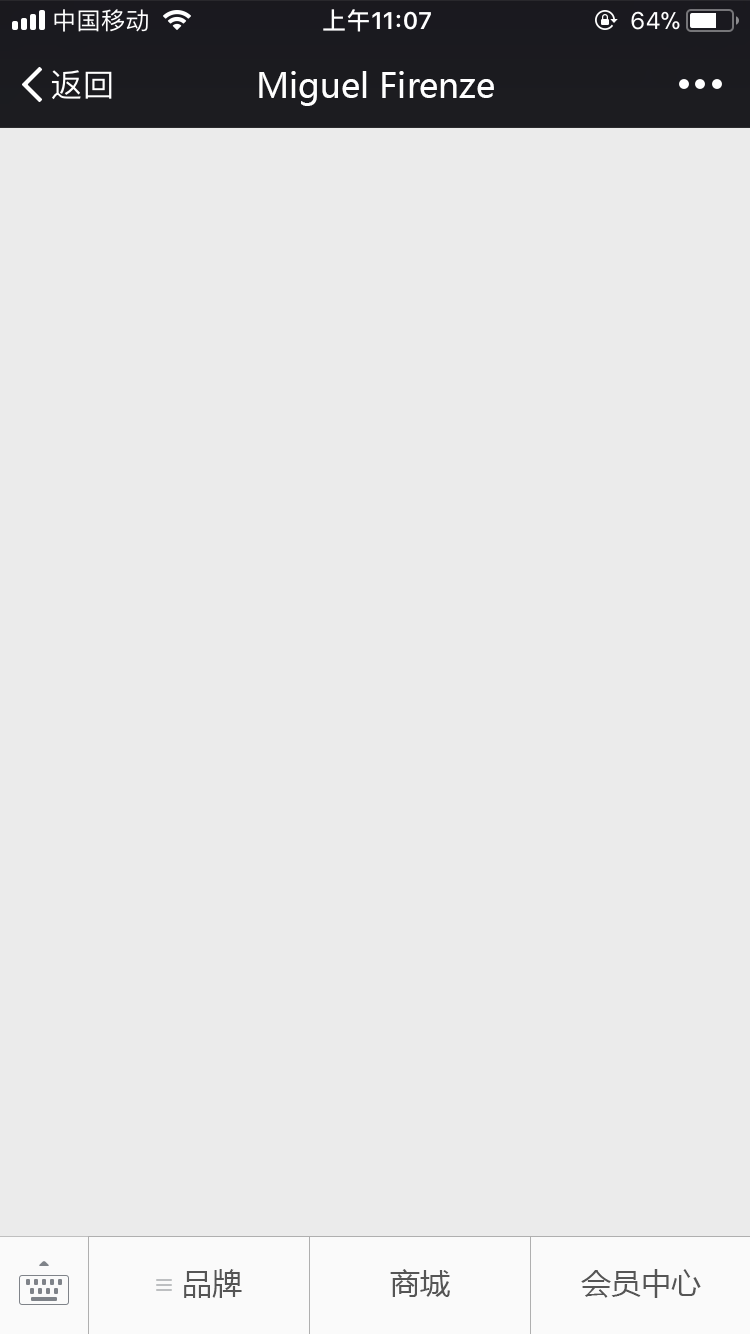
<style>
.page{position:relative;width:750px;height:1334px;background:#ebebeb}
.page>*{position:absolute;margin:0}
.t1{font:34px "MicrosoftYaHei";color:#ffffff}
.t2{font:30px "MicrosoftYaHei";color:#555555}
</style>
<div class="page">
<p class="t1" style="left:259px;top:71px;width:235px;height:35px">Miguel Firenze</p>
<p class="t2" style="left:184px;top:1269px;width:58px;height:29px">品牌</p>
<p class="t2" style="left:390px;top:1269px;width:60px;height:28px">商城</p>
<p class="t2" style="left:581px;top:1269px;width:120px;height:29px">会员中心</p>
</div>
